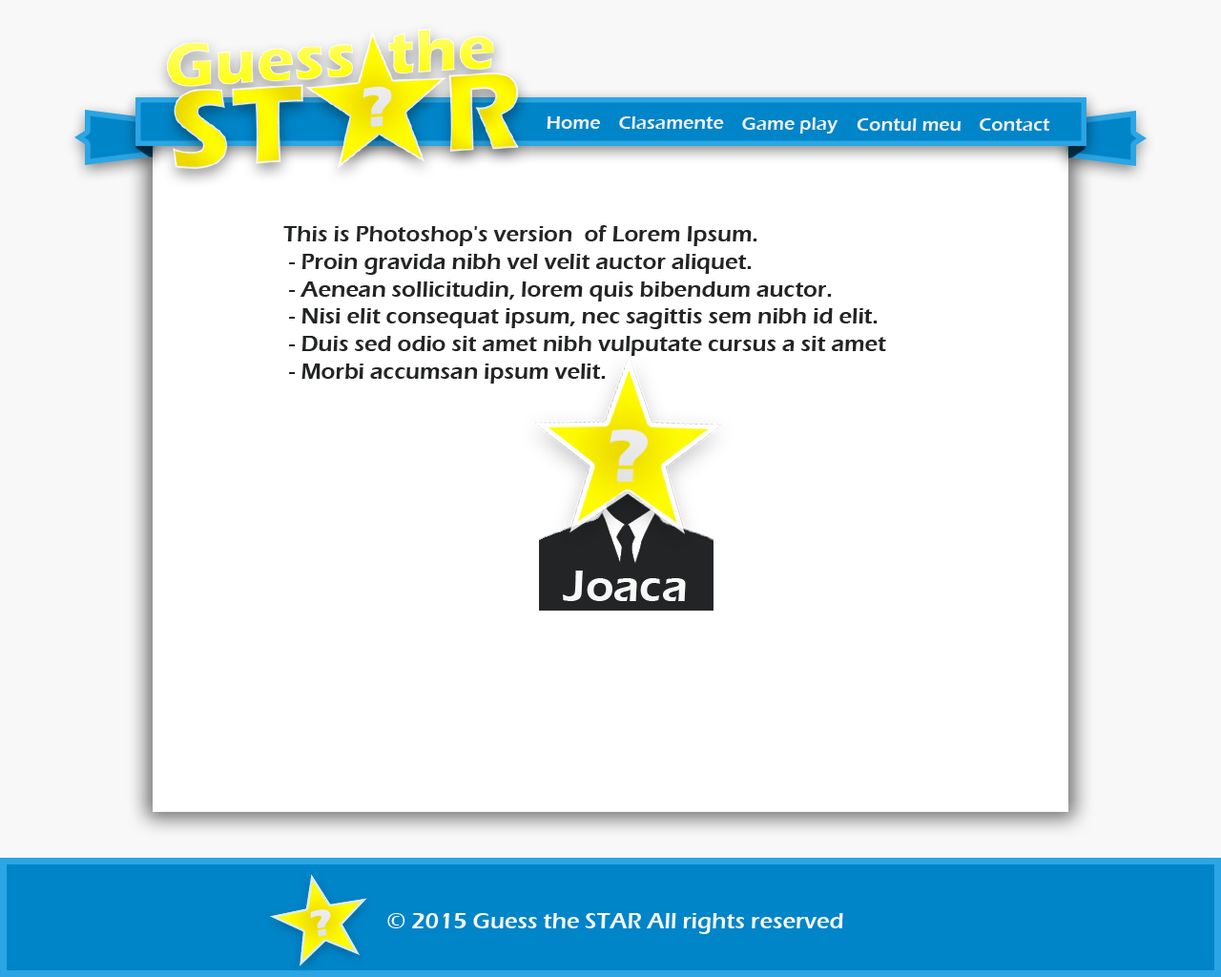
<style>
.page{position:relative;width:1221px;height:977px;background:#ffffff}
.page>*{position:absolute;margin:0}
.t1{font:19.1px "ErasITC-Demi";color:#eeeeee}
.t2{font:22.9px "ErasITC-Demi";color:#232425}
.t3{font:45.8px "ErasITC-Demi";color:#f8f8f8}
.t4{font:22.9px "ErasITC-Demi";color:#f8f8f8}
</style>
<div class="page">
<p class="t1" style="left:547px;top:116px;width:53px;height:13px">Home</p>
<p class="t1" style="left:619px;top:116px;width:105px;height:13px">Clasamente</p>
<p class="t1" style="left:742px;top:117px;width:96px;height:17px">Game play</p>
<p class="t1" style="left:857px;top:118px;width:103px;height:13px">Contul meu</p>
<p class="t1" style="left:980px;top:118px;width:70px;height:13px">Contact</p>
<p class="t2" style="left:283px;top:225px;width:603px;height:158px">This is Photoshop's version  of Lorem Ipsum. <br> - Proin gravida nibh vel velit auctor aliquet. <br> - Aenean sollicitudin, lorem quis bibendum auctor.<br> - Nisi elit consequat ipsum, nec sagittis sem nibh id elit.   <br> - Duis sed odio sit amet nibh vulputate cursus a sit amet <br> - Morbi accumsan ipsum velit.</p>
<p class="t3" style="left:563px;top:570px;width:123px;height:31px">Joaca</p>
<p class="t4" style="left:387px;top:913px;width:456px;height:21px">© 2015 Guess the STAR All rights reserved</p>
</div>
